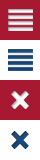
<style>
.page{position:relative;width:40px;height:160px;background:#ffffff}
.page>*{position:absolute;margin:0}
.t1{font:25px "Guifxv2Transports";color:#eff5fa}
.t2{font:25px "Guifxv2Transports";color:#18487a}
</style>
<div class="page">
<p class="t1" style="left:11px;top:91px;width:18px;height:18px">x</p>
<p class="t2" style="left:11px;top:131px;width:18px;height:18px">x</p>
</div>
